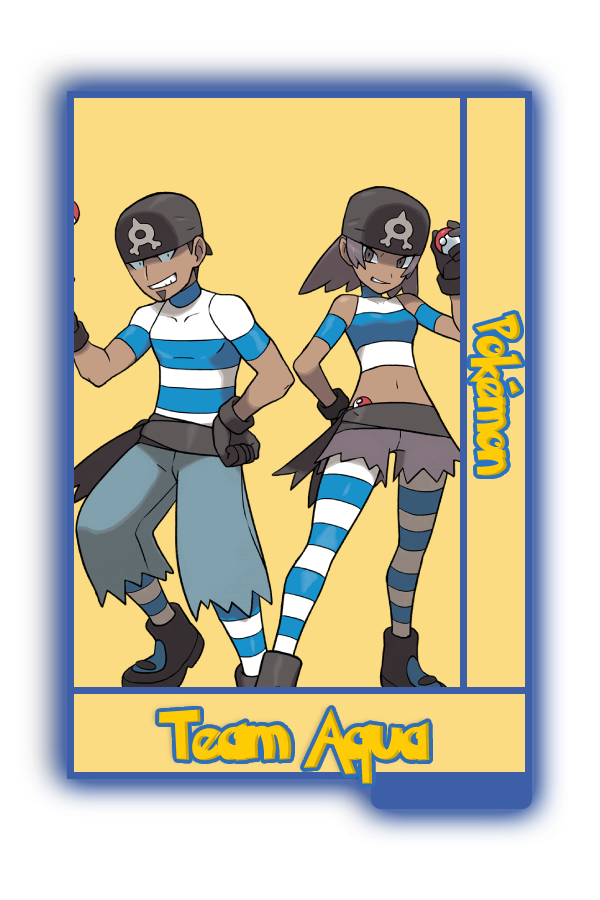
<style>
.page{position:relative;width:600px;height:900px;background:#fbdc83}
.page>*{position:absolute;margin:0}
.t1{font:48.8px "PokemonSolidNormal";color:#ffcb05;scale:0.8 1}
.t2{font:56.6px "PokemonSolidNormal";color:#ffcb05;scale:0.92 1}
</style>
<div class="page">
<p class="t1" style="left:469px;top:313px;width:54px;height:163px;rotate:90deg">Pokémon</p>
<p class="t2" style="left:159px;top:708px;width:271px;height:76px">Team Aqua</p>
</div>
